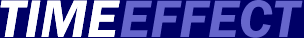
<style>
.page{position:relative;width:304px;height:38px;background:#000066}
.page>*{position:absolute;margin:0}
.t1{font:54.2px "FranklinGothic-DemiItalic";color:#ffffff}
.t2{font:54.2px "FranklinGothic-DemiItalic";color:#6666cc}
</style>
<div class="page">
<p class="t1" style="left:0px;top:0px;width:120px;height:37px">TIME</p>
<p class="t1" style="left:0px;top:0px;width:120px;height:37px">TIME</p>
<p class="t2" style="left:120px;top:0px;width:183px;height:38px">EFFECT</p>
</div>
